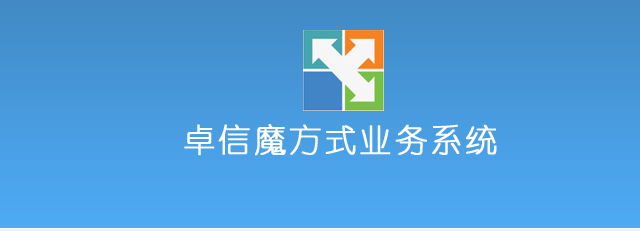
<style>
.page{position:relative;width:640px;height:231px}
.page>*{position:absolute;margin:0}
.t1{font:32px "YouYuan";letter-spacing:0.075em;color:#ffffff;font-weight:bold}
</style>
<div class="page">
<p class="t1" style="left:184px;top:124px;width:313px;height:32px">卓信魔方式业务系统</p>
</div>
